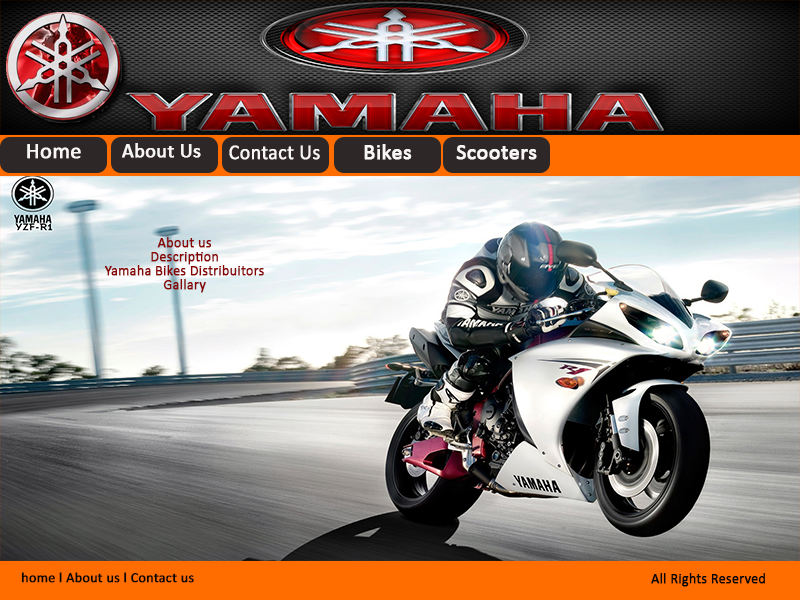
<style>
.page{position:relative;width:800px;height:600px}
.page>*{position:absolute;margin:0}
.t1{font:22px "Calibri";color:#f9f6f6;font-weight:bold}
.t2{font:20px "Calibri";color:#f9f6f6;font-weight:bold}
.t3{font:21.2px "Calibri";color:#f9f6f6;font-weight:bold;scale:0.93 1}
.t4{font:14px/14px "Calibri";color:#880404;font-weight:bold}
.t5{font:14.1px "Calibri";color:#070707;font-weight:bold}
.t6{font:14px "Calibri";color:#070707;font-weight:bold}
</style>
<div class="page">
<p class="t1" style="left:27px;top:144px;width:54px;height:15px">Home</p>
<p class="t2" style="left:122px;top:143px;width:79px;height:15px">About Us</p>
<p class="t3" style="left:229px;top:145px;width:91px;height:15px">Contact Us</p>
<p class="t1" style="left:364px;top:144px;width:48px;height:16px">Bikes</p>
<p class="t1" style="left:456px;top:145px;width:81px;height:15px">Scooters</p>
<p class="t4" style="left:104px;top:237px;width:160px;height:56px;text-align:center">About us <br>Description<br>Yamaha Bikes Distribuitors<br>Gallary</p>
<p class="t5" style="left:21px;top:572px;width:173px;height:11px">home l About us l Contact us</p>
<p class="t6" style="left:651px;top:573px;width:114px;height:14px">All Rights Reserved</p>
</div>
